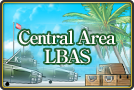
<style>
.page{position:relative;width:134px;height:90px}
.page>*{position:absolute;margin:0}
.t1{font:18px/19px "RyuminPro-ExBold";letter-spacing:-0.08em;color:#ffffff}
</style>
<div class="page">
<p class="t1" style="left:19px;top:30px;width:97px;height:34px;text-align:center">Central Area<br>LBAS</p>
</div>
